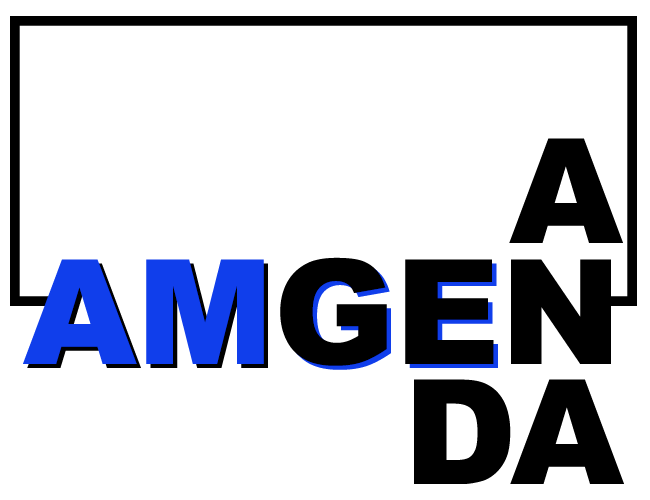
<style>
.page{position:relative;width:650px;height:500px;background:#ffffff}
.page>*{position:absolute;margin:0}
.t1{font:145.8px "Arial-Black";color:#000000}
.t2{font:145.8px "Arial-Black";color:#103eec}
</style>
<div class="page">
<p class="t1" style="left:509px;top:138px;width:114px;height:105px">A</p>
<p class="t1" style="left:23px;top:257px;width:588px;height:109px"><span class="t2">AM</span>GEN</p>
<p class="t1" style="left:27px;top:261px;width:471px;height:109px">AM<span class="t2">GE</span></p>
<p class="t1" style="left:414px;top:379px;width:210px;height:105px">DA</p>
</div>
